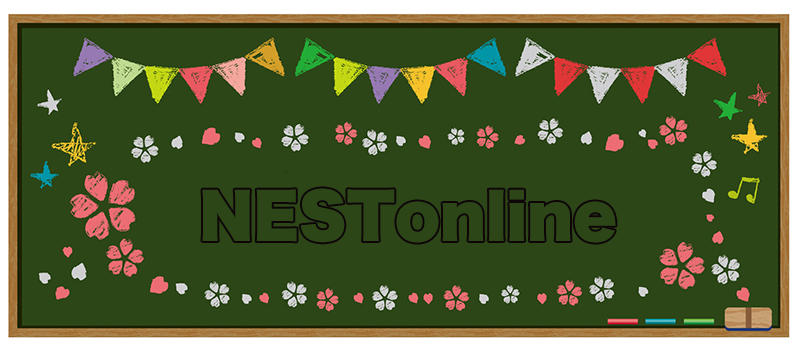
<style>
.page{position:relative;width:800px;height:352px;background:#2c4617}
.page>*{position:absolute;margin:0}
.t1{font:60px "HiraKakADKStd-W9";color:#2c4617}
</style>
<div class="page">
<p class="t1" style="left:202px;top:188px;width:414px;height:55px">NESTonline</p>
</div>
